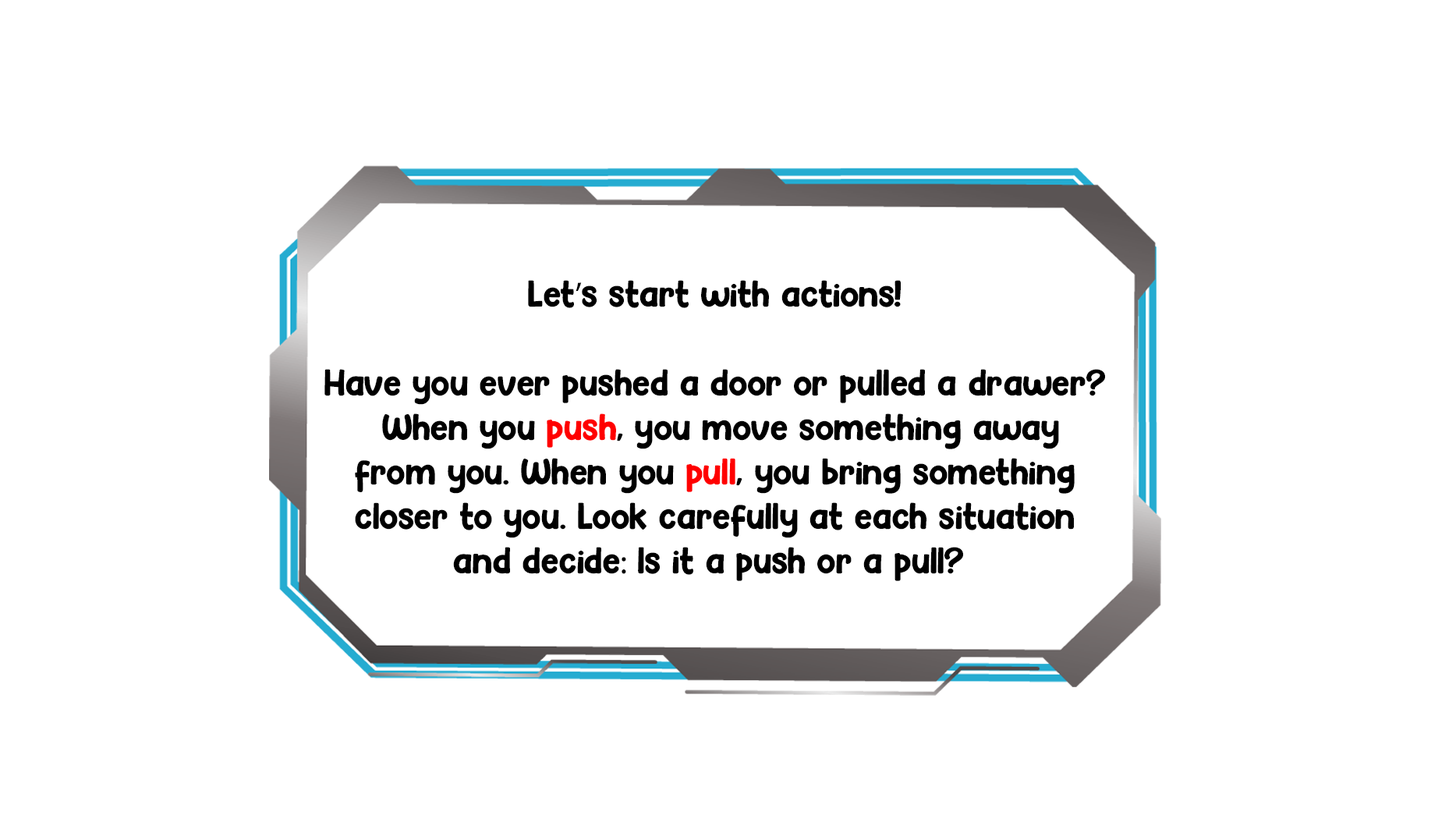
<style>
.page{position:relative;width:1456px;height:819px;background:#ffffff}
.page>*{position:absolute;margin:0}
.t1{font:34.9px/44.5px "Hey-Comic";letter-spacing:-0.025em;color:#000000}
.t2{font:34.9px/44.5px "MyriadPro-Regular";letter-spacing:-0.025em;color:#000000}
.t3{font:34.9px/44.5px "Hey-Comic";letter-spacing:-0.025em;color:#ff0000}
</style>
<div class="page">
<p class="t1" style="left:324px;top:280px;width:781px;height:301px;text-align:center">Let<span class="t2">’</span>s start with actions!<br><br>Have you ever pushed a door or pulled a drawer?<br> When you <span class="t3">push</span>, you move something away<br>from you. When you <span class="t3">pull</span>, you bring something<br>closer to you. Look carefully at each situation<br>and decide<span class="t2">:</span> Is it a push or a pull?</p>
</div>
